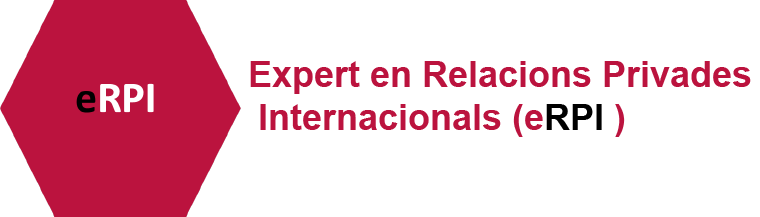
<style>
.page{position:relative;width:760px;height:217px;background:#ffffff}
.page>*{position:absolute;margin:0}
.t1{font:36px "Arial-BoldMT";color:#bb133e}
.t2{font:36px "Arial-BoldMT";color:#000000}
</style>
<div class="page">
<p class="t1" style="left:250px;top:61px;width:501px;height:76px">Expert en Relacions Privades<br> Internacionals (e<span class="t2">RPI</span> )</p>
</div>
